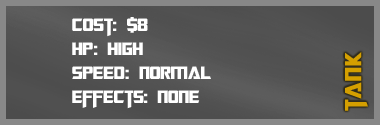
<style>
.page{position:relative;width:380px;height:125px}
.page>*{position:absolute;margin:0}
.t1{font:20px "TransformersMovie";color:#ffffff}
.t2{font:20px "TransformersMovie";letter-spacing:0.04em;color:#ffffff}
.t3{font:26px "TransformersMovie";letter-spacing:0.04em;color:#d49f00}
</style>
<div class="page">
<p class="t1" style="left:72px;top:17px;width:139px;height:92px">Cost: $8<br>h<span class="t2">p</span>: high<br>Spee<span class="t2">d</span>: normal<br>effects: none</p>
<p class="t3" style="left:345px;top:52px;width:23px;height:59px;rotate:-90deg">tank</p>
</div>
